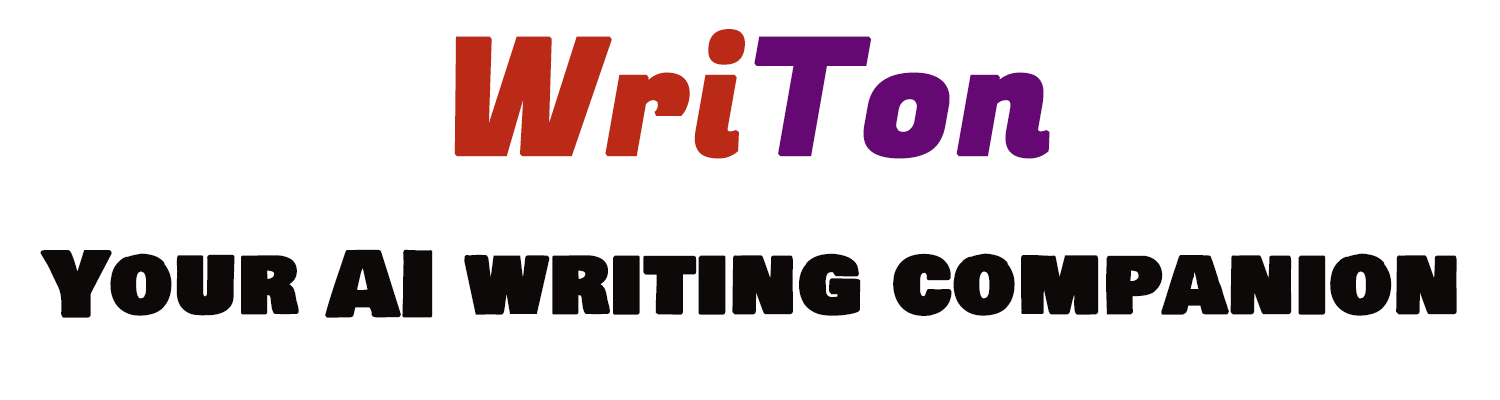
<style>
.page{position:relative;width:1500px;height:400px;background:#ffffff}
.page>*{position:absolute;margin:0}
.t1{font:160px "FugazOne-Regular";color:#ba2a17;font-weight:bold}
.t2{font:160px "FugazOne-Regular";color:#660874;font-weight:bold}
.t3{font:86.7px "BowlbyOneSC-Regular";color:#0d0909;font-weight:bold}
</style>
<div class="page">
<p class="t1" style="left:454px;top:29px;width:596px;height:130px">Wri<span class="t2">Ton</span></p>
<p class="t3" style="left:40px;top:249px;width:1417px;height:69px">Your AI writing companion</p>
</div>
